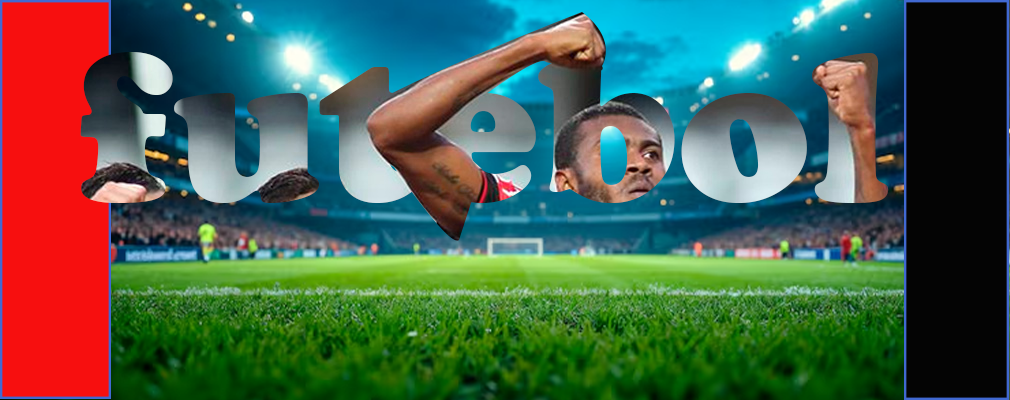
<style>
.page{position:relative;width:1010px;height:400px}
.page>*{position:absolute;margin:0}
.t1{font:220px "CooperBlack"}
</style>
<div class="page">
<p class="t1" style="left:80px;top:52px;width:809px;height:151px">futebol</p>
</div>
